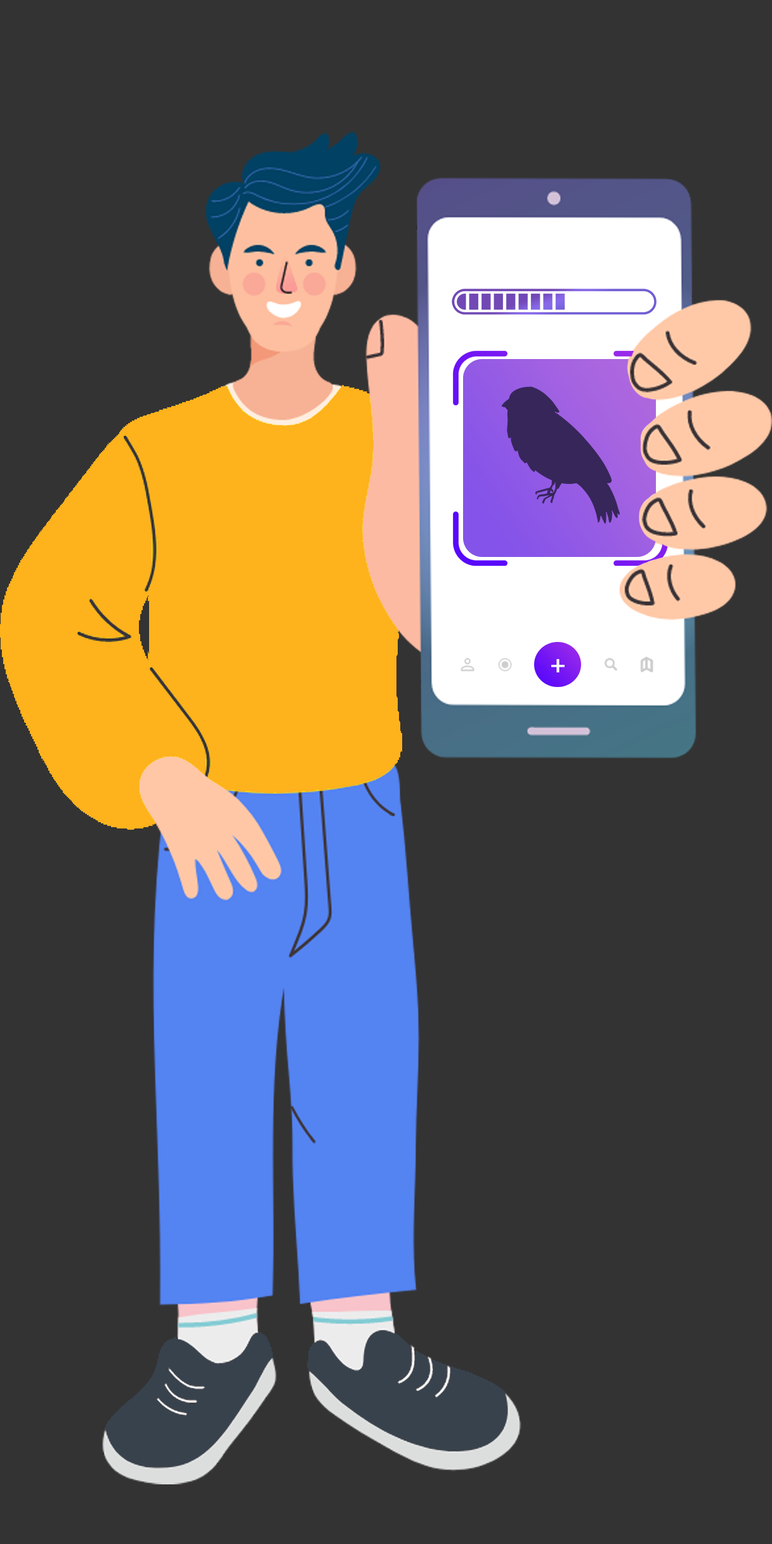
<style>
.page{position:relative;width:772px;height:1544px;background:#333333}
.page>*{position:absolute;margin:0}
.t1{font:26.7px "OpenSans";letter-spacing:-0.01em;color:#ffffff;font-weight:bold}
</style>
<div class="page">
<p class="t1" style="left:551px;top:659px;width:14px;height:14px">+</p>
</div>
